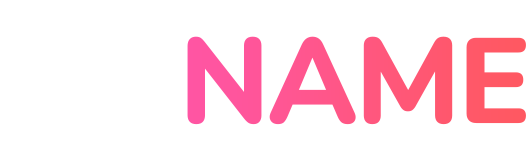
<style>
.page{position:relative;width:530px;height:160px;background:#ffffff}
.page>*{position:absolute;margin:0}
.t1{font:120.8px "Nunito-ExtraBold";letter-spacing:-0.025em}
</style>
<div class="page">
<p class="t1" style="left:187px;top:36px;width:339px;height:89px">NAME</p>
</div>
